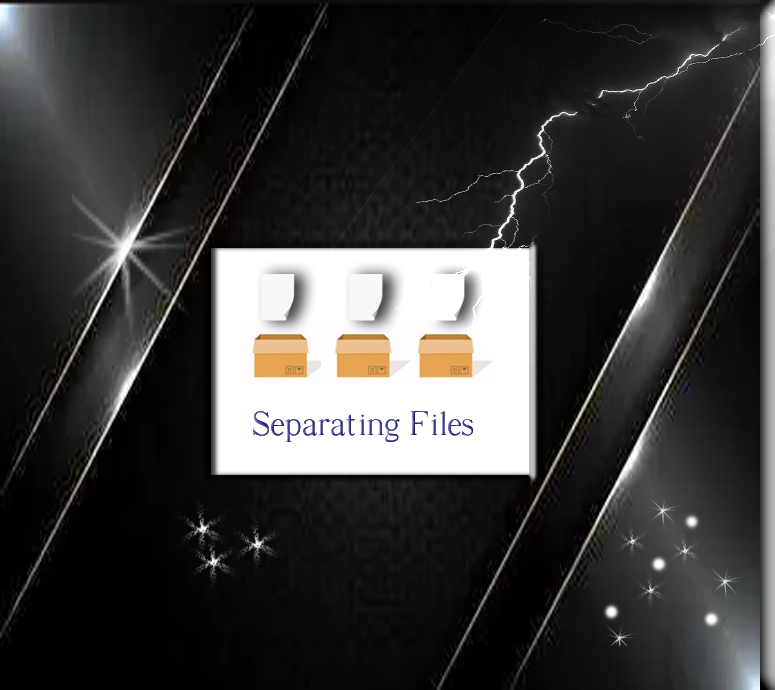
<style>
.page{position:relative;width:775px;height:690px}
.page>*{position:absolute;margin:0}
.t1{font:34.9px "SuperFrench";color:#383493}
</style>
<div class="page">
<p class="t1" style="left:253px;top:411px;width:220px;height:31px">Separating Files</p>
<p class="t1" style="left:253px;top:411px;width:220px;height:31px">Separating Files</p>
</div>
